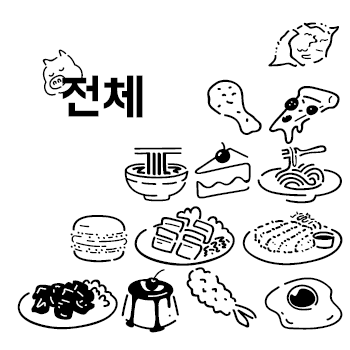
<style>
.page{position:relative;width:350px;height:350px;background:#ffffff}
.page>*{position:absolute;margin:0}
.t1{font:36.1px "BMHANNAPro";color:#000000}
.t2{font:38.9px "BMHANNAPro";color:#000000}
.t3{font:33.3px "BMHANNAPro";color:#000000}
.t4{font:37.5px "BMHANNAPro";color:#000000}
.t5{font:31.9px "BMHANNAPro";color:#000000}
.t6{font:26.6px "BMHANNAPro";color:#000000;scale:0.95 1}
.t7{font:50px "BMHANNAPro";color:#000000}
</style>
<div class="page">
<p class="t1" style="left:17px;top:22px;width:326px;height:311px;text-align:center"><span class="t2">           </span><span class="t3">겢<br></span><span class="t4">       칰핒<br></span><span class="t5">짲잌</span>슽<br>맠봈캋<br>붋젙<span class="t4">웉랂</span></p>
<p class="t6" style="left:42px;top:49px;width:41px;height:47px;rotate:-28deg">됒</p>
<p class="t7" style="left:62px;top:75px;width:81px;height:43px">전체</p>
</div>
